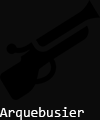
<style>
.page{position:relative;width:100px;height:120px;background:#0b0b0b}
.page>*{position:absolute;margin:0}
.t1{font:14px "Consolas";color:#ffffff}
</style>
<div class="page">
<p class="t1" style="left:0px;top:107px;width:84px;height:13px">Arquebusier</p>
</div>
